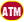
<style>
.page{position:relative;width:24px;height:22px;background:#b00630}
.page>*{position:absolute;margin:0}
.t1{font:11px "DirtyHeadline";color:#fdfcfc}
</style>
<div class="page">
<p class="t1" style="left:2px;top:7px;width:19px;height:10px">ATM</p>
</div>
